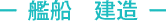
<style>
.page{position:relative;width:166px;height:22px;background:#ffffff}
.page>*{position:absolute;margin:0}
.t1{font:22px "GothicMB101Pro-Medium";color:#1dbcc0}
</style>
<div class="page">
<p class="t1" style="left:28px;top:0px;width:110px;height:21px">艦船   建造</p>
</div>
